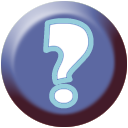
<style>
.page{position:relative;width:128px;height:128px;background:#ffffff}
.page>*{position:absolute;margin:0}
.t1{font:108px "ShowcardGothic-Reg";color:#ffffff}
</style>
<div class="page">
<p class="t1" style="left:45px;top:20px;width:46px;height:86px">?</p>
</div>
